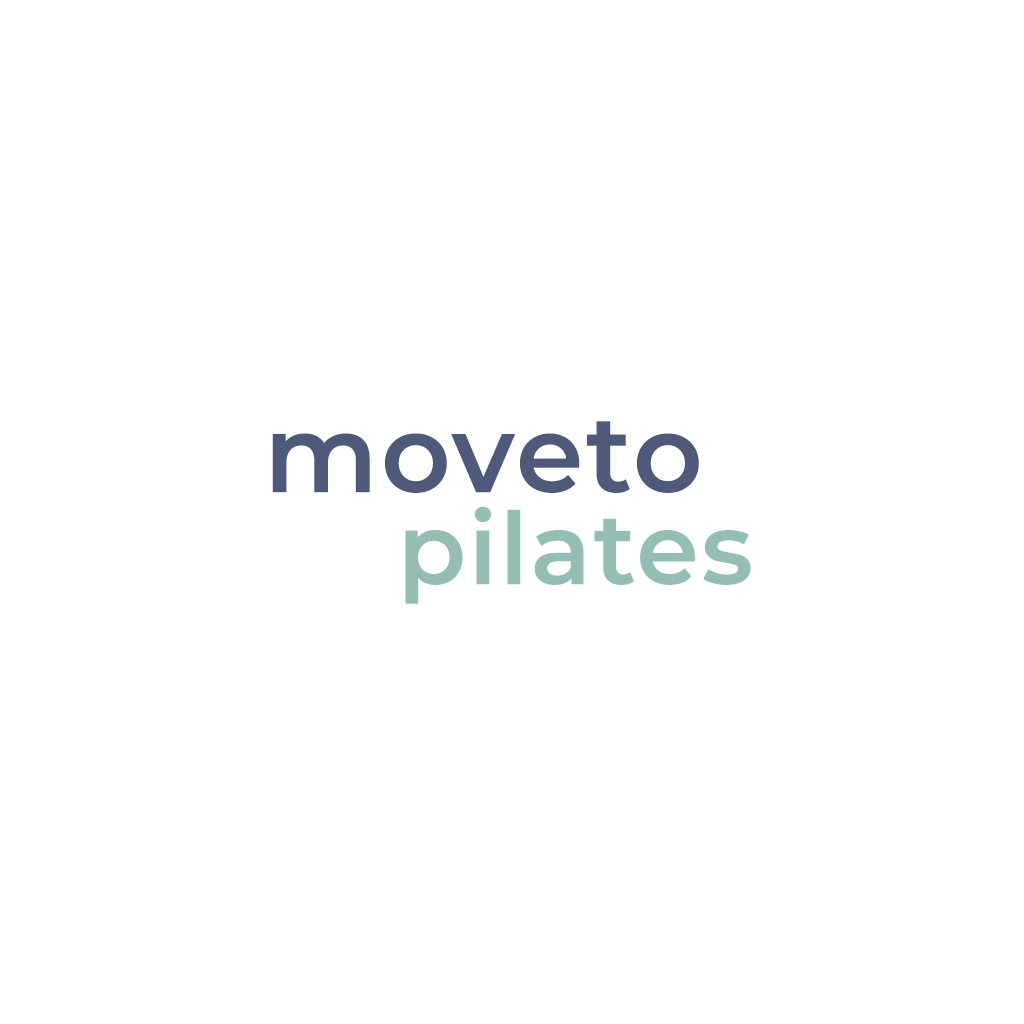
<style>
.page{position:relative;width:1024px;height:1024px;background:#ffffff}
.page>*{position:absolute;margin:0}
.t1{font:108.3px "Montserrat-SemiBold";letter-spacing:0.025em;color:#4f5a7a}
.t2{font:100px "Montserrat-SemiBold";letter-spacing:0.025em;color:#94beb4}
</style>
<div class="page">
<p class="t1" style="left:272px;top:421px;width:427px;height:72px">moveto</p>
<p class="t2" style="left:405px;top:506px;width:346px;height:98px">pilates</p>
</div>
